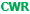
<style>
.page{position:relative;width:30px;height:14px;background:#ffffff}
.page>*{position:absolute;margin:0}
.t1{font:12px "Tahoma-Bold";letter-spacing:-0.025em;color:#00a651}
</style>
<div class="page">
<p class="t1" style="left:1px;top:2px;width:29px;height:9px">CWR</p>
</div>
